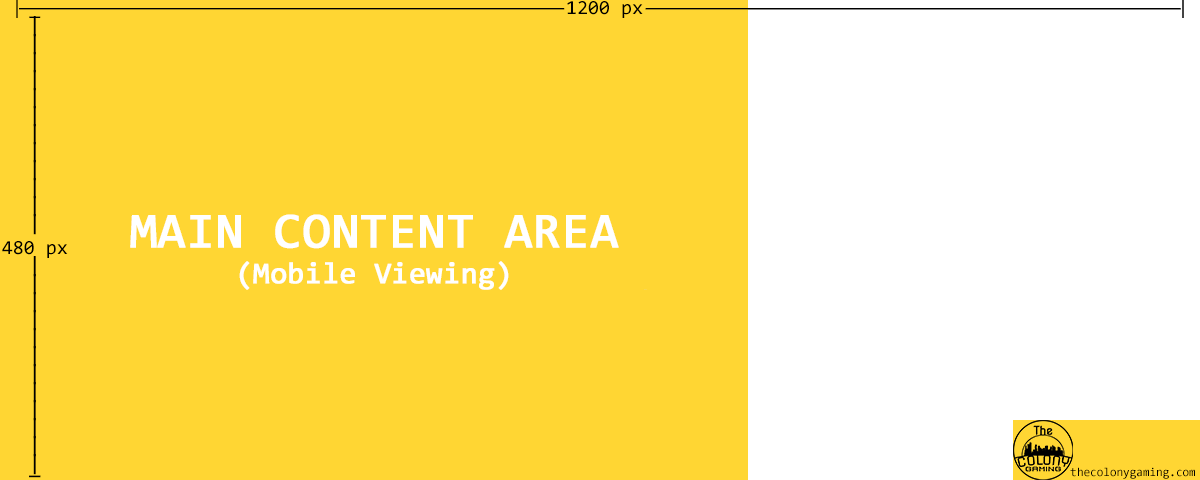
<style>
.page{position:relative;width:1200px;height:480px;background:#ffd633}
.page>*{position:absolute;margin:0}
.t1{font:20px "Consolas";letter-spacing:-0.3em;color:#000000}
.t2{font:20px "Consolas";color:#000000}
.t3{font:20px/18px "Consolas";color:#000000;font-weight:bold}
.t4{font:20px/3px "Consolas";color:#000000;font-weight:bold}
.t5{font:50px/18px "Consolas";color:#ffffff;font-weight:bold}
.t6{font:30px "Consolas";color:#ffffff;font-weight:bold}
.t7{font:12px "Consolas";color:#000000}
</style>
<div class="page">
<p class="t1" style="left:16px;top:0px;width:1168px;height:18px">|------------------------------------------------------------------------------------------------------------- <span class="t2">1200 px</span>-----------------------------------------------------------------------------------------------------------|</p>
<p class="t3" style="left:2px;top:16px;width:66px;height:462px;text-align:center"><span class="t2">_<br></span>|<br>|<br>|<br>|<br>|<br>|<br>|<br>|<br>|<br>|<br>|<br>|<br><span class="t2">480 px<br></span>|<br>|<br>|<br>|<br>|<br>|<br>|<br>|<br>|<br>|<br>|<br>|<br><span class="t4">_</span></p>
<p class="t5" style="left:130px;top:214px;width:489px;height:76px;text-align:center">MAIN CONTENT AREA<br><span class="t6">(Mobile Viewing)</span></p>
<p class="t7" style="left:1070px;top:467px;width:125px;height:12px">thecolonygaming.com</p>
</div>
